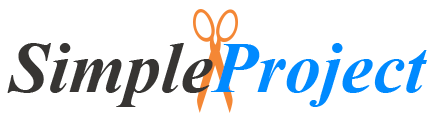
<style>
.page{position:relative;width:442px;height:113px;background:#ffffff}
.page>*{position:absolute;margin:0}
.t1{font:72px "TimesNewRomanPS-BoldItalicMT";color:#373533}
.t2{font:72px "TimesNewRomanPS-BoldItalicMT";color:#008aff}
</style>
<div class="page">
<p class="t1" style="left:7px;top:43px;width:206px;height:64px">Simple</p>
<p class="t2" style="left:210px;top:43px;width:217px;height:64px">Project</p>
</div>
